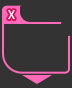
<style>
.page{position:relative;width:72px;height:88px;background:#333333}
.page>*{position:absolute;margin:0}
.t1{font:12px "JK-Gothic-M";color:#ffffff}
</style>
<div class="page">
<p class="t1" style="left:8px;top:10px;width:7px;height:10px">X</p>
</div>
